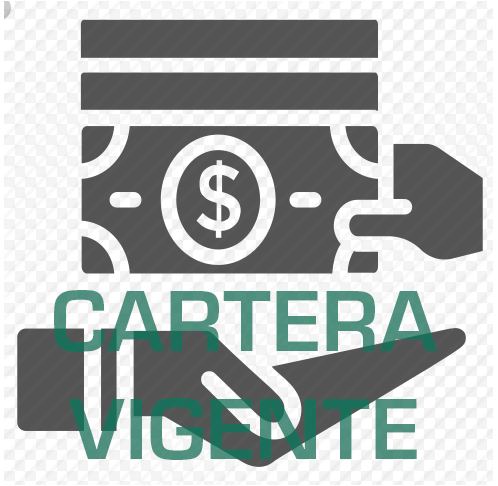
<style>
.page{position:relative;width:498px;height:486px;background:#545454}
.page>*{position:absolute;margin:0}
.t1{font:90px "Eurostile-Bol";color:#4f8f7d}
</style>
<div class="page">
<p class="t1" style="left:54px;top:290px;width:384px;height:170px;text-align:center">CARTERA<br>VIGENTE</p>
</div>
